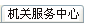
<style>
.page{position:relative;width:85px;height:25px;background:#ffffff}
.page>*{position:absolute;margin:0}
.t1{font:12px "SimSun";color:#151010}
</style>
<div class="page">
<p class="t1" style="left:8px;top:8px;width:71px;height:11px">机关服务中心</p>
</div>
